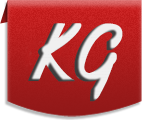
<style>
.page{position:relative;width:142px;height:120px}
.page>*{position:absolute;margin:0}
.t1{font:80.9px "Alako-Bold";color:#ffffff;text-transform:uppercase;font-weight:bold}
</style>
<div class="page">
<p class="t1" style="left:28px;top:23px;width:95px;height:79px">KG</p>
</div>
